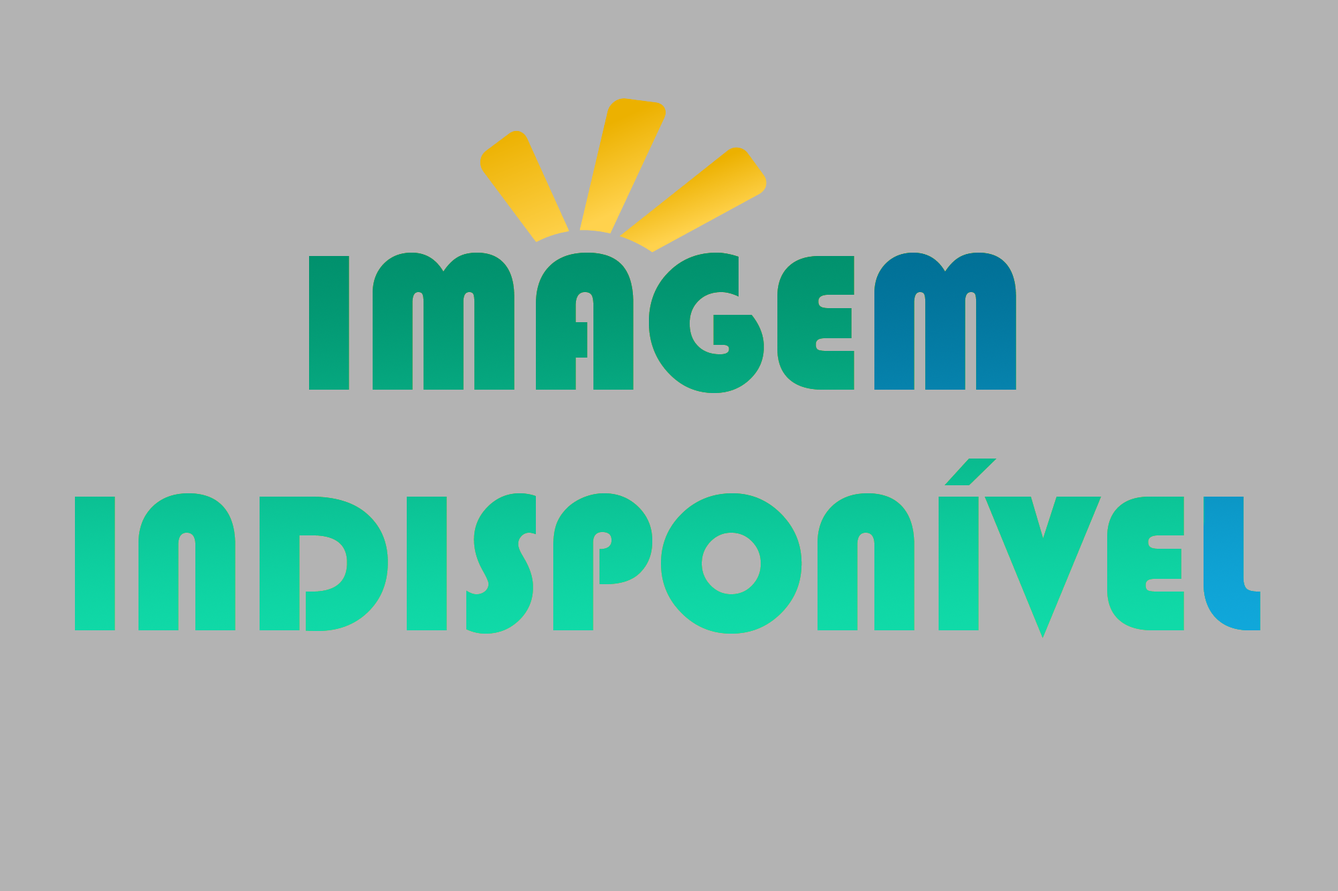
<style>
.page{position:relative;width:1338px;height:891px;background:#b3b3b3}
.page>*{position:absolute;margin:0}
.t1{font:200.6px "Bauhaus93"}
</style>
<div class="page">
<p class="t1" style="left:75px;top:253px;width:1185px;height:386px;text-align:center">IMAGEM<br>INDISPONÍVEL</p>
</div>
